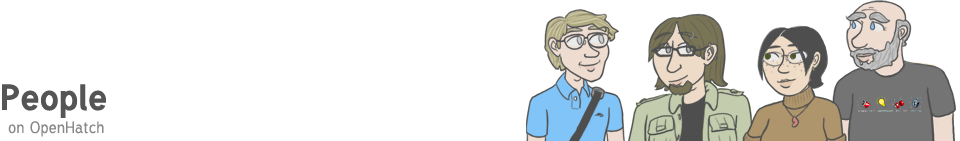
<style>
.page{position:relative;width:960px;height:141px;background:#ffffff}
.page>*{position:absolute;margin:0}
.t1{font:36px "Tuffy-Bold";color:#555555}
.t2{font:16px "Tuffy";color:#888888}
</style>
<div class="page">
<p class="t1" style="left:2px;top:84px;width:104px;height:34px">People</p>
<p class="t2" style="left:8px;top:121px;width:96px;height:16px">on OpenHatch</p>
</div>
